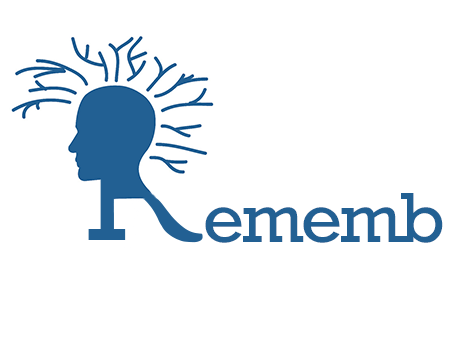
<style>
.page{position:relative;width:454px;height:340px;background:#ffffff}
.page>*{position:absolute;margin:0}
.t1{font:71.9px "Rockwell";letter-spacing:-0.04em;color:#226093}
</style>
<div class="page">
<p class="t1" style="left:205px;top:193px;width:238px;height:50px">ememb</p>
</div>
